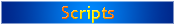
<style>
.page{position:relative;width:175px;height:25px}
.page>*{position:absolute;margin:0}
.t1{font:18px "TrebuchetMS"}
</style>
<div class="page">
<p class="t1" style="left:62px;top:6px;width:52px;height:17px">Scripts</p>
</div>
